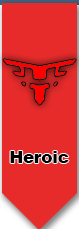
<style>
.page{position:relative;width:79px;height:229px;background:#e72b2b}
.page>*{position:absolute;margin:0}
.t1{font:16.7px "Arial-Black";letter-spacing:-0.01em;color:#000000}
</style>
<div class="page">
<p class="t1" style="left:10px;top:151px;width:59px;height:12px">Heroic</p>
</div>
